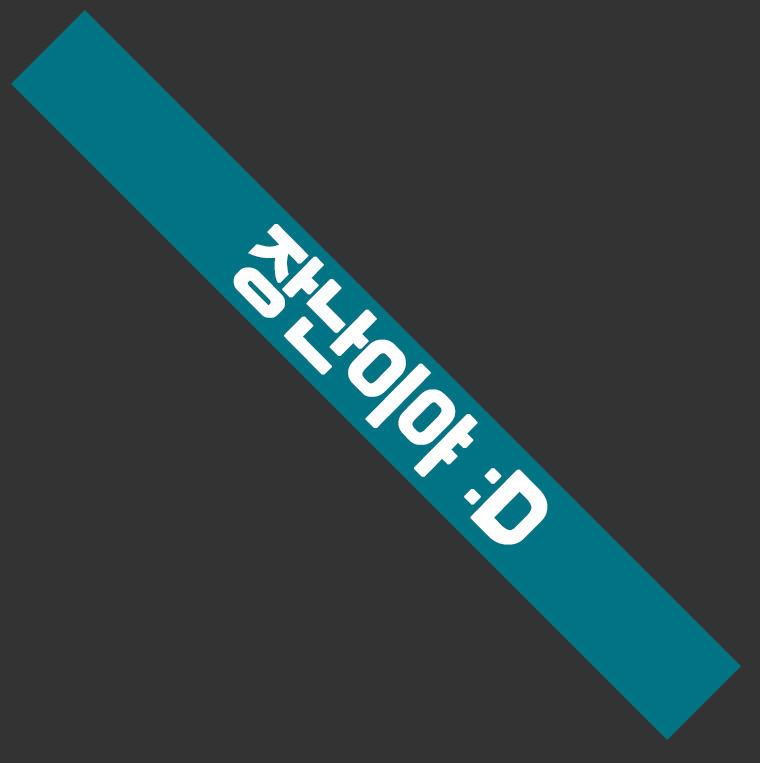
<style>
.page{position:relative;width:760px;height:763px;background:#333333}
.page>*{position:absolute;margin:0}
.t1{font:91.5px "BMHANNA11yrsold";letter-spacing:-0.04em;color:#ffffff;font-weight:bold}
</style>
<div class="page">
<p class="t1" style="left:233px;top:224px;width:315px;height:321px;rotate:45deg">장난이야 :D</p>
</div>
